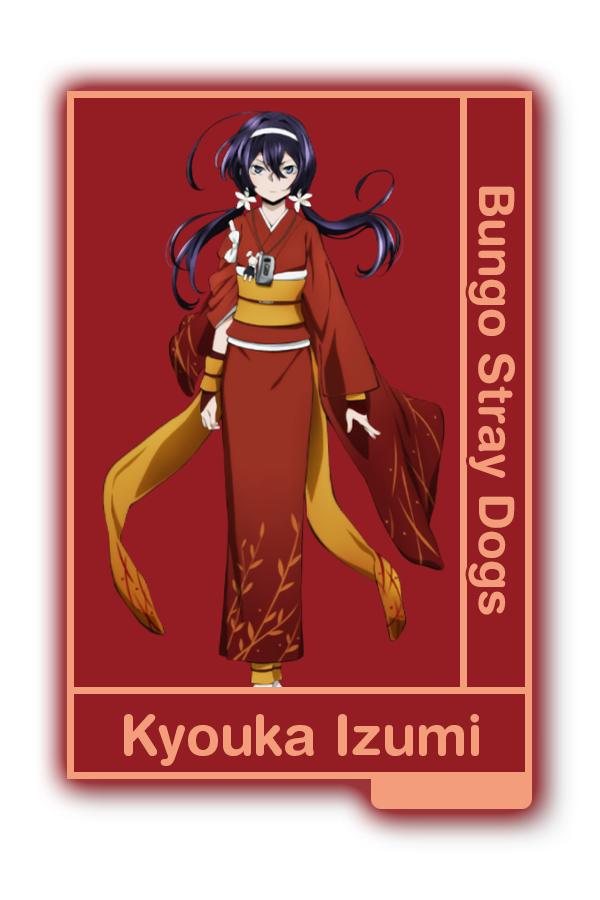
<style>
.page{position:relative;width:600px;height:900px;background:#941d23}
.page>*{position:absolute;margin:0}
.t1{font:48.8px "HelveticaRounded-Bold";color:#f39d7b}
.t2{font:55.4px "HelveticaRounded-Bold";color:#f39d7b}
</style>
<div class="page">
<p class="t1" style="left:468px;top:186px;width:47px;height:429px;rotate:90deg">Bungo Stray Dogs</p>
<p class="t2" style="left:124px;top:714px;width:355px;height:52px">Kyouka Izumi</p>
</div>
